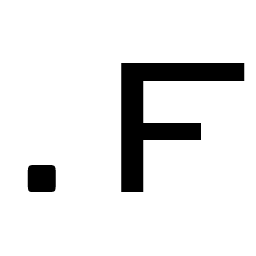
<style>
.page{position:relative;width:256px;height:256px;background:#ffffff}
.page>*{position:absolute;margin:0}
.t1{font:250px "BankGothicBT-Light";color:#000000}
</style>
<div class="page">
<p class="t1" style="left:27px;top:63px;width:218px;height:129px">.F</p>
</div>
